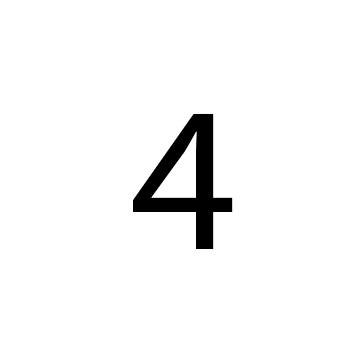
<style>
.page{position:relative;width:354px;height:354px;background:#ffffff}
.page>*{position:absolute;margin:0}
.t1{font:208.3px "MyriadPro-Regular";color:#000000}
</style>
<div class="page">
<p class="t1" style="left:133px;top:113px;width:100px;height:136px">4</p>
</div>
